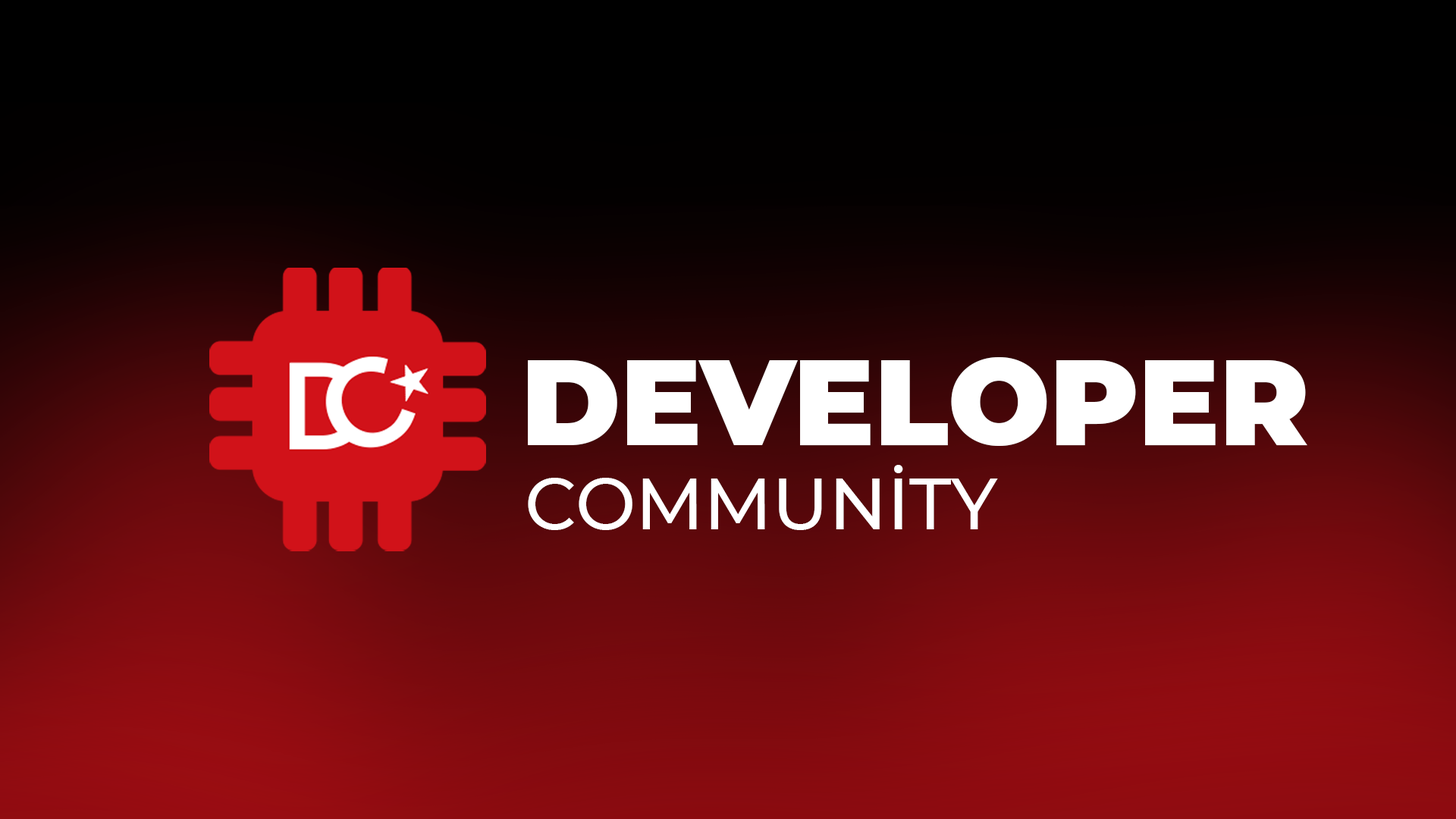
<style>
.page{position:relative;width:1456px;height:819px}
.page>*{position:absolute;margin:0}
.t1{font:120.5px "Montserrat-Black";color:#ffffff}
.t2{font:71.6px "Montserrat-Medium";color:#ffffff}
</style>
<div class="page">
<p class="t1" style="left:528px;top:357px;width:779px;height:89px">DEVELOPER</p>
<p class="t2" style="left:528px;top:465px;width:470px;height:65px">COMMUNİTY</p>
</div>
